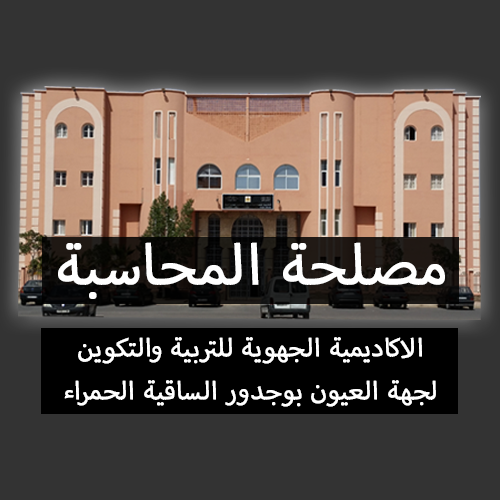
<style>
.page{position:relative;width:500px;height:500px;background:#333333}
.page>*{position:absolute;margin:0}
.t1{font:79.8px "MyriadArabic-Regular";color:#ffffff;font-weight:bold}
.t2{font:35.4px "MyriadArabic-Regular";color:#ffffff;font-weight:bold}
</style>
<div class="page">
<p class="t1" style="left:58px;top:242px;width:387px;height:57px">مصلحة المحاسبة</p>
<p class="t2" style="left:64px;top:337px;width:372px;height:70px;text-align:center">الاكاديمية الجهوية للتربية والتكوين<br>لجهة العيون بوجدور الساقية الحمراء</p>
</div>
